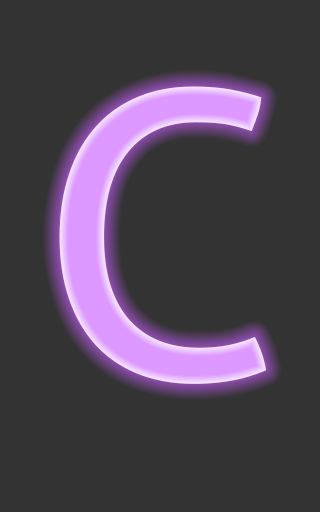
<style>
.page{position:relative;width:320px;height:512px;background:#333333}
.page>*{position:absolute;margin:0}
.t1{font:400px "Aller-Regular"}
</style>
<div class="page">
<p class="t1" style="left:59px;top:86px;width:207px;height:298px">C</p>
</div>
